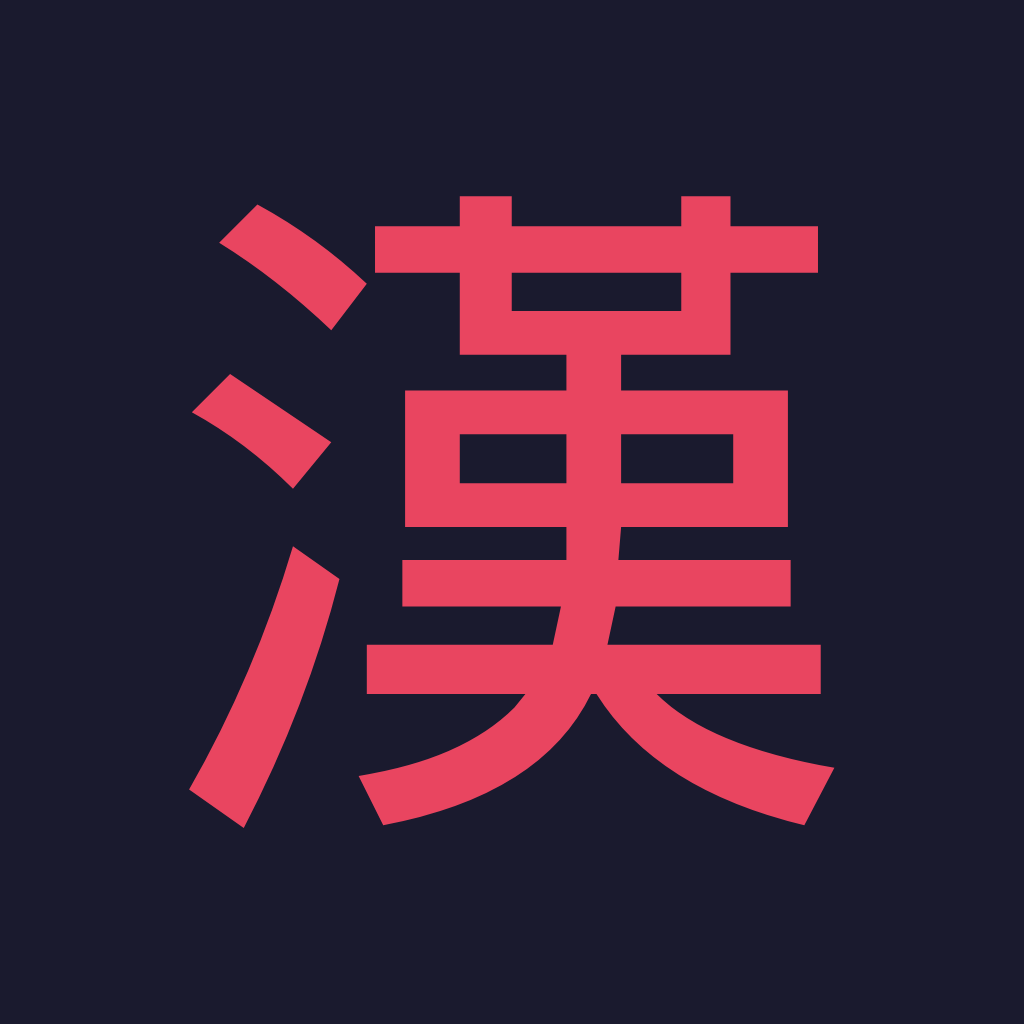
<style>
.page{position:relative;width:1024px;height:1024px;background:#1a1a2e}
.page>*{position:absolute;margin:0}
.t1{font:700px "DroidSansFallback";color:#e94560}
</style>
<div class="page">
<p class="t1" style="left:189px;top:196px;width:646px;height:632px">漢</p>
</div>
